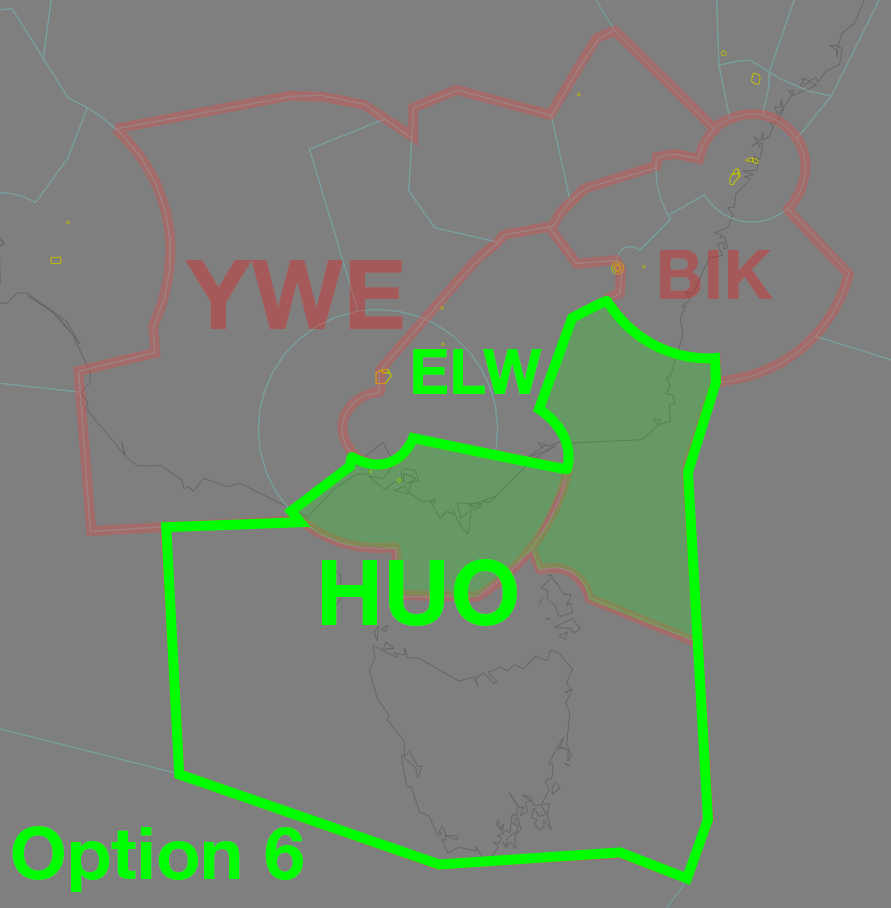
<style>
.page{position:relative;width:891px;height:908px;background:#7f7f7f}
.page>*{position:absolute;margin:0}
.t1{font:68.7px "HelveticaNeueLTStd-Bd";color:#a65959}
.t2{font:97.3px "HelveticaNeueLTStd-Bd";color:#a65959}
.t3{font:63px "HelveticaNeueLTStd-Bd";color:#00ff00}
.t4{font:91.6px "HelveticaNeueLTStd-Bd";color:#00ff00}
.t5{font:72.5px "HelveticaNeueLTStd-Bd";color:#00ff00}
</style>
<div class="page">
<p class="t1" style="left:660px;top:250px;width:113px;height:49px">BIK</p>
<p class="t2" style="left:185px;top:260px;width:218px;height:69px">YWE</p>
<p class="t3" style="left:413px;top:349px;width:129px;height:45px">ELW</p>
<p class="t4" style="left:322px;top:559px;width:195px;height:67px">HUO</p>
<p class="t5" style="left:12px;top:826px;width:291px;height:66px">Option 6</p>
</div>
